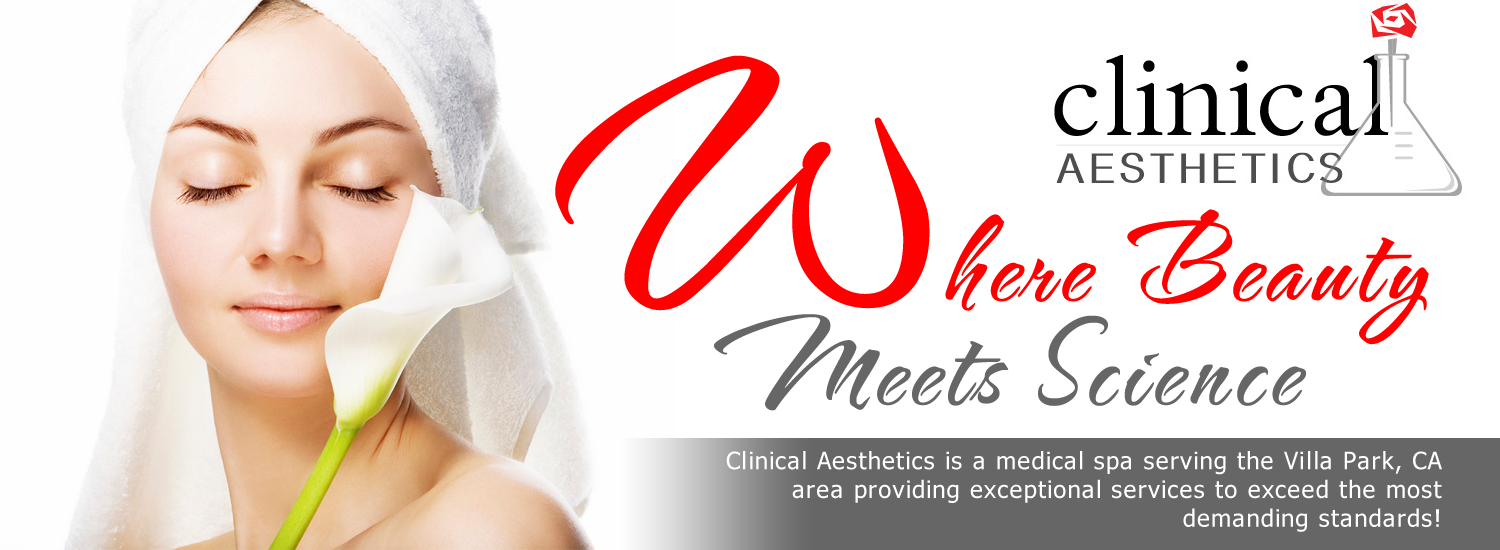
<style>
.page{position:relative;width:1500px;height:550px;background:#ffffff}
.page>*{position:absolute;margin:0}
.t1{font:136px/103.7px "TheNautiGalROB";letter-spacing:0.05em;color:#666666}
.t2{font:400px/103.7px "TheNautiGalROB";letter-spacing:0.05em;color:#ff0000}
.t3{font:136px/103.7px "TheNautiGalROB";letter-spacing:0.05em;color:#ff0000}
.t4{font:24px "Tahoma";letter-spacing:0.05em;color:#ffffff}
</style>
<div class="page">
<p class="t1" style="left:555px;top:55px;width:874px;height:356px;text-align:center"><span class="t2">W</span><span class="t3">here Beauty <br></span>Meets Science</p>
<p class="t4" style="left:726px;top:451px;width:716px;height:81px;text-align:right">Clinical Aesthetics is a medical spa serving the Villa Park, CA area providing exceptional services to exceed the most demanding standards!</p>
</div>
